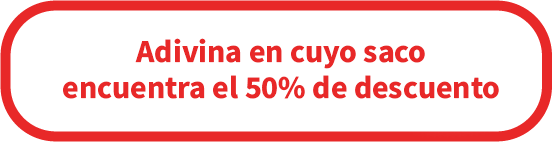
<style>
.page{position:relative;width:552px;height:142px;background:#ffffff}
.page>*{position:absolute;margin:0}
.t1{font:32px/36px "SourceSansRoman-Bold";color:#e82828}
</style>
<div class="page">
<p class="t1" style="left:63px;top:38px;width:436px;height:61px;text-align:center">Adivina en cuyo saco<br>encuentra el 50% de descuento</p>
</div>
